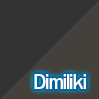
<style>
.page{position:relative;width:99px;height:99px;background:#333333}
.page>*{position:absolute;margin:0}
.t1{font:18px "GothicMB101Pro-DeBold";letter-spacing:-0.08em;color:#fdfbf9;scale:0.9 1}
</style>
<div class="page">
<p class="t1" style="left:34px;top:74px;width:52px;height:15px">Dimiliki</p>
</div>
